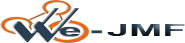
<style>
.page{position:relative;width:185px;height:43px;background:#ffffff}
.page>*{position:absolute;margin:0}
.t1{font:17.4px "Arial-BoldMT";scale:2.31 1}
</style>
<div class="page">
<p class="t1" style="left:107px;top:24px;width:78px;height:12px">JMF</p>
</div>
